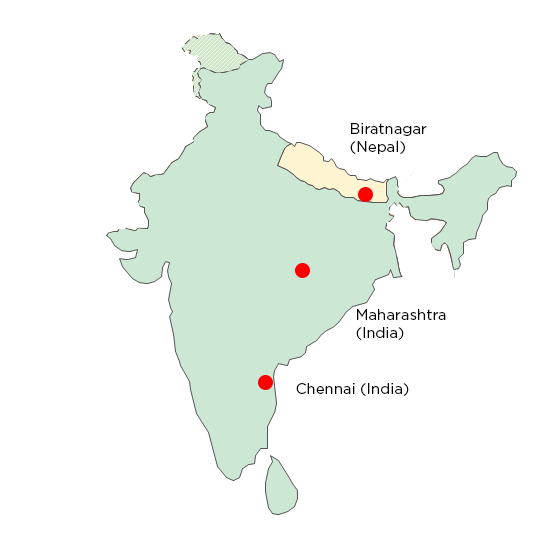
<style>
.page{position:relative;width:552px;height:537px;background:#ffffff}
.page>*{position:absolute;margin:0}
.t1{font:15px "Gotham-Book";color:#000000}
</style>
<div class="page">
<p class="t1" style="left:350px;top:123px;width:77px;height:31px;text-align:right">Biratnagar (Nepal)</p>
<p class="t1" style="left:356px;top:309px;width:90px;height:31px;text-align:right">Maharashtra (India)<br>(</p>
<p class="t1" style="left:296px;top:383px;width:113px;height:13px">Chennai (India)</p>
</div>
